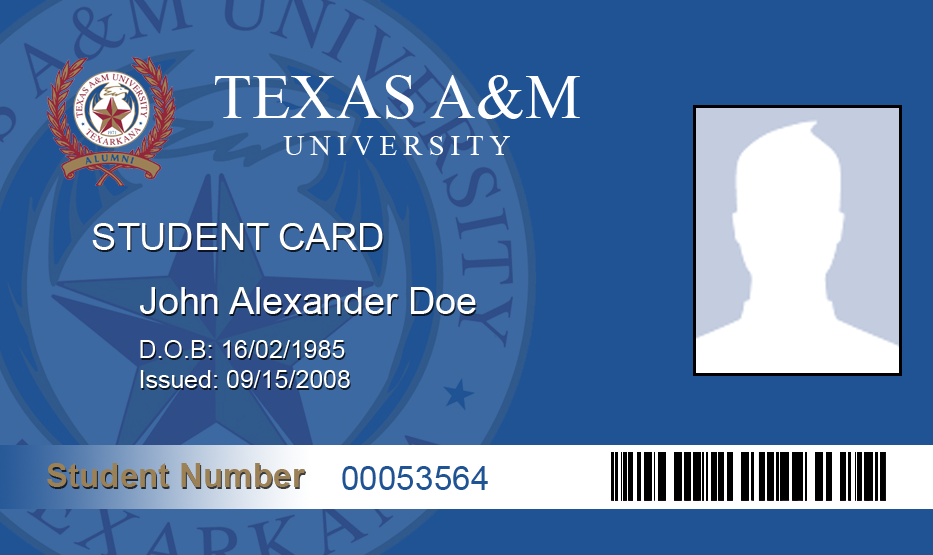
<style>
.page{position:relative;width:933px;height:555px;background:#205394}
.page>*{position:absolute;margin:0}
.t1{font:62.5px "TimesNewRomanPSMT";letter-spacing:0.01em;color:#ffffff}
.t2{font:29.2px "TimesNewRomanPSMT";letter-spacing:0.2em;color:#ffffff}
.t3{font:37.5px "ArialMT";color:#ffffff}
.t4{font:25px "ArialMT";color:#ffffff}
.t5{font:33.3px "Arial-BoldMT";color:#9c8156}
.t6{font:33.3px "ArialMT";color:#205394}
</style>
<div class="page">
<p class="t1" style="left:215px;top:75px;width:365px;height:44px">TEXAS A&amp;M</p>
<p class="t2" style="left:283px;top:136px;width:227px;height:20px">UNIVERSITY</p>
<p class="t3" style="left:92px;top:223px;width:291px;height:27px">STUDENT CARD</p>
<p class="t3" style="left:140px;top:287px;width:336px;height:27px">John Alexander Doe</p>
<p class="t4" style="left:140px;top:340px;width:210px;height:48px">D.O.B: 16/02/1985<br>Issued: 09/15/2008</p>
<p class="t5" style="left:47px;top:463px;width:258px;height:24px">Student Number</p>
<p class="t6" style="left:342px;top:466px;width:146px;height:24px">00053564</p>
</div>
